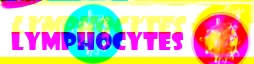
<style>
.page{position:relative;width:254px;height:64px;background:#ffffff}
.page>*{position:absolute;margin:0}
.t1{font:24px "ShowcardGothic-Reg"}
</style>
<div class="page">
<p class="t1" style="left:11px;top:23px;width:173px;height:18px">LYMPHOCYTES</p>
</div>
